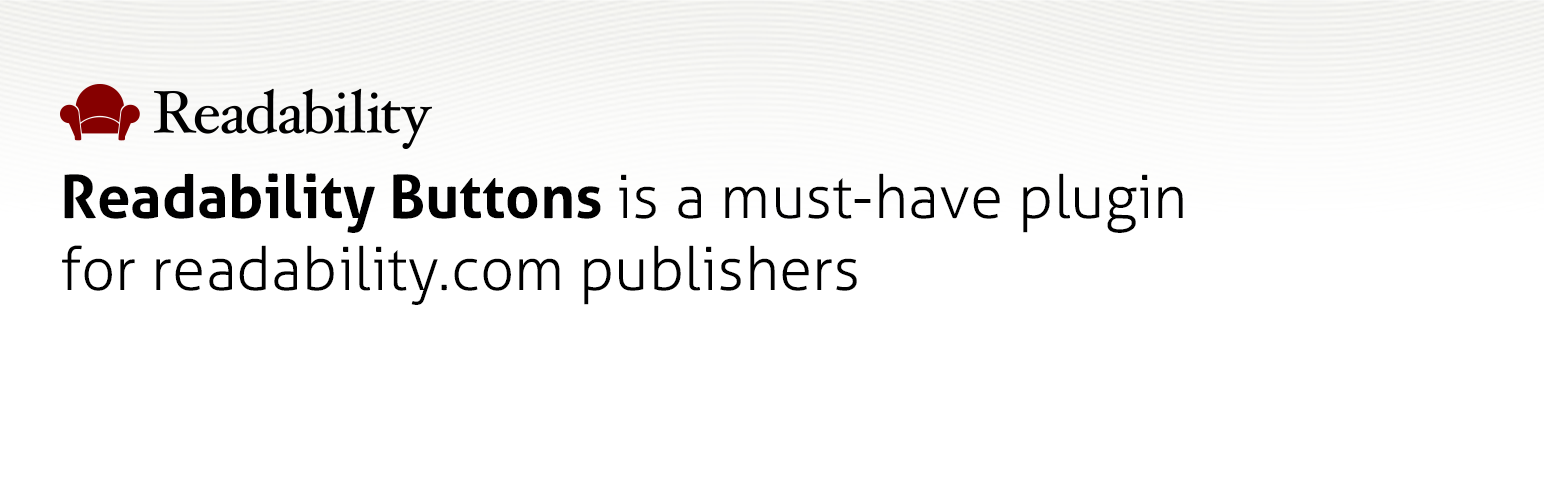
<style>
.page{position:relative;width:1544px;height:500px;background:#ffffff}
.page>*{position:absolute;margin:0}
.t1{font:60px "Aller-Light";color:#000000}
.t2{font:60px "Aller-Bold";color:#000000}
</style>
<div class="page">
<p class="t1" style="left:62px;top:173px;width:1121px;height:132px"><span class="t2">Readability Buttons </span>is a must-have plugin for readability.com publishers</p>
</div>
